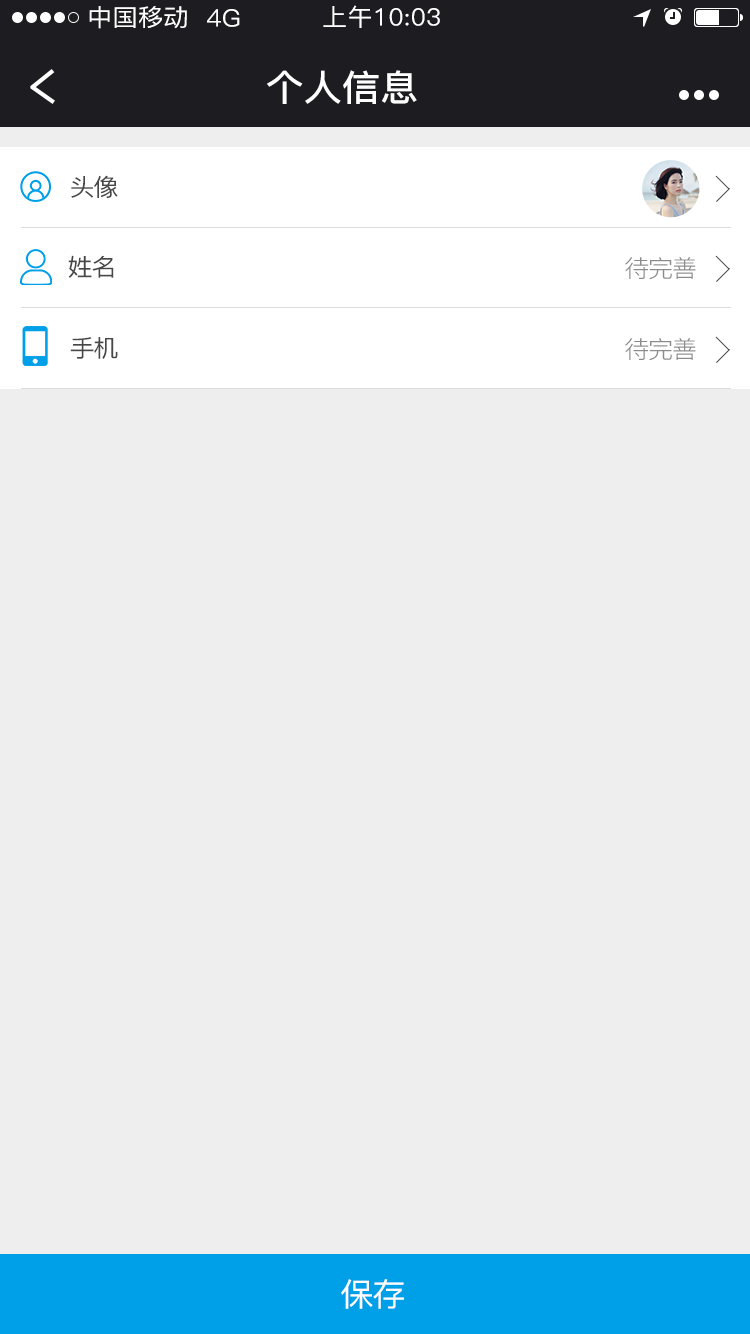
<style>
.page{position:relative;width:750px;height:1334px;background:#eeeeee}
.page>*{position:absolute;margin:0}
.t1{font:24px "PingFang-SC-Medium";letter-spacing:0.01em;color:#ffffff;scale:1.05 1}
.t2{font:36px "PingFang-SC-Bold";letter-spacing:0.01em;color:#ffffff;scale:1.05 1}
.t3{font:24px "PingFang-SC-Medium";letter-spacing:-0.05em;color:#474747;scale:1.05 1}
.t4{font:24px "PingFang-SC-Regular";letter-spacing:-0.05em;color:#8c8b8b;scale:1.05 1}
.t5{font:32px "PingFang-SC-Medium";letter-spacing:-0.05em;color:#ffffff;scale:1.05 1}
</style>
<div class="page">
<p class="t1" style="left:89px;top:6px;width:98px;height:23px">中国移动</p>
<p class="t1" style="left:323px;top:5px;width:117px;height:23px">上午10:03</p>
<p class="t1" style="left:207px;top:9px;width:33px;height:18px">4G</p>
<p class="t2" style="left:267px;top:70px;width:150px;height:34px">个人信息</p>
<p class="t3" style="left:71px;top:175px;width:47px;height:23px">头像</p>
<p class="t3" style="left:68px;top:255px;width:46px;height:23px">姓名</p>
<p class="t4" style="left:625px;top:257px;width:71px;height:23px">待完善</p>
<p class="t3" style="left:70px;top:337px;width:48px;height:22px">手机</p>
<p class="t4" style="left:625px;top:338px;width:71px;height:23px">待完善</p>
<p class="t5" style="left:341px;top:1279px;width:63px;height:30px">保存</p>
</div>
